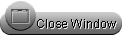
<style>
.page{position:relative;width:122px;height:35px;background:#ffffff}
.page>*{position:absolute;margin:0}
.t1{font:12px "ArialMT";letter-spacing:0.02em;color:#000000}
.t2{font:12px "ArialMT";letter-spacing:0.02em;color:#e8e8e8}
</style>
<div class="page">
<p class="t1" style="left:37px;top:19px;width:79px;height:9px">Close Window</p>
<p class="t2" style="left:38px;top:20px;width:79px;height:9px">Close Window</p>
</div>
